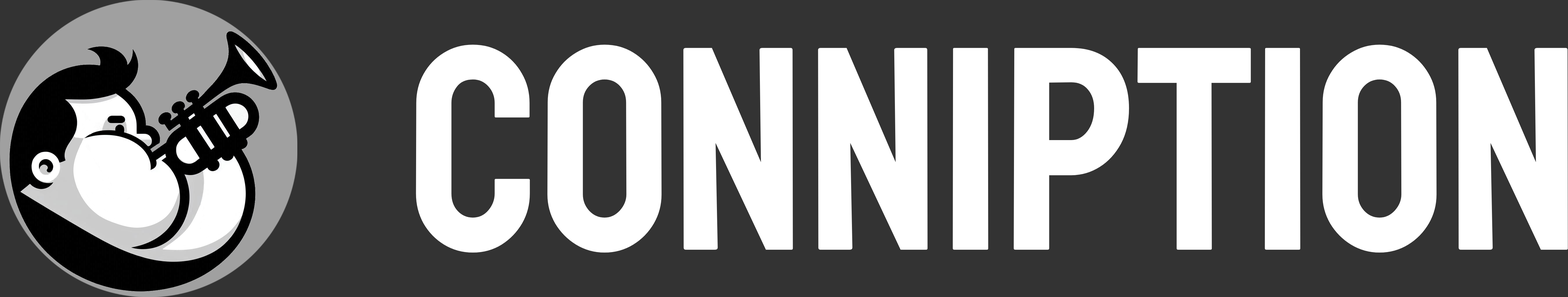
<style>
.page{position:relative;width:1568px;height:297px;background:#333333}
.page>*{position:absolute;margin:0}
.t1{font:290.4px "Koulen-Regular";color:#ffffff}
</style>
<div class="page">
<p class="t1" style="left:416px;top:44px;width:1152px;height:209px">Conniption</p>
</div>
